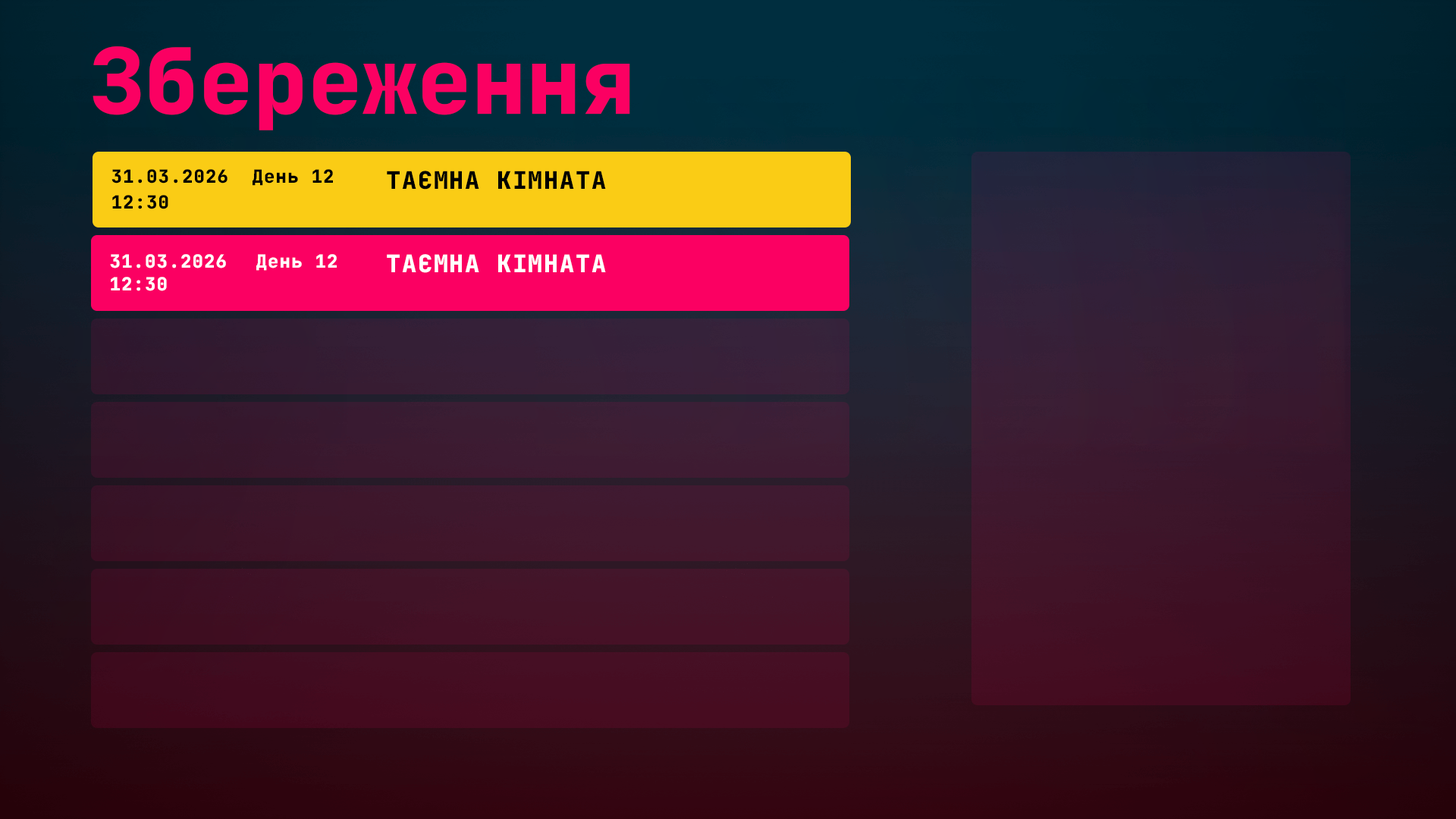
<style>
.page{position:relative;width:1456px;height:819px}
.page>*{position:absolute;margin:0}
.t1{font:91px "JetBrainsMono-ExtraBold";color:#fb0062}
.t2{font:18.2px "JetBrainsMono-ExtraBold";letter-spacing:0.05em;color:#000000}
.t3{font:18.2px "JetBrainsMono-ExtraBold";letter-spacing:0.05em;color:#000000;text-transform:uppercase}
.t4{font:24.3px "JetBrainsMono-ExtraBold";letter-spacing:0.05em;color:#000000;text-transform:uppercase}
.t5{font:18.2px "JetBrainsMono-ExtraBold";letter-spacing:0.05em;color:#ffffff}
.t6{font:18.2px "JetBrainsMono-ExtraBold";letter-spacing:0.05em;color:#ffffff;text-transform:uppercase}
.t7{font:24.3px "JetBrainsMono-ExtraBold";letter-spacing:0.05em;color:#ffffff;text-transform:uppercase}
</style>
<div class="page">
<p class="t1" style="left:93px;top:46px;width:537px;height:84px">Збереження</p>
<p class="t2" style="left:111px;top:169px;width:116px;height:15px">31.03.2026</p>
<p class="t2" style="left:253px;top:169px;width:80px;height:17px"><span class="t3">Д</span>ень 12</p>
<p class="t4" style="left:387px;top:171px;width:219px;height:19px">таємна кімната</p>
<p class="t2" style="left:112px;top:195px;width:56px;height:14px">12:30</p>
<p class="t5" style="left:110px;top:254px;width:116px;height:14px">31.03.2026</p>
<p class="t5" style="left:256px;top:254px;width:81px;height:17px"><span class="t6">Д</span>ень 12</p>
<p class="t7" style="left:387px;top:254px;width:219px;height:19px">таємна кімната</p>
<p class="t5" style="left:111px;top:277px;width:56px;height:14px">12:30</p>
</div>
